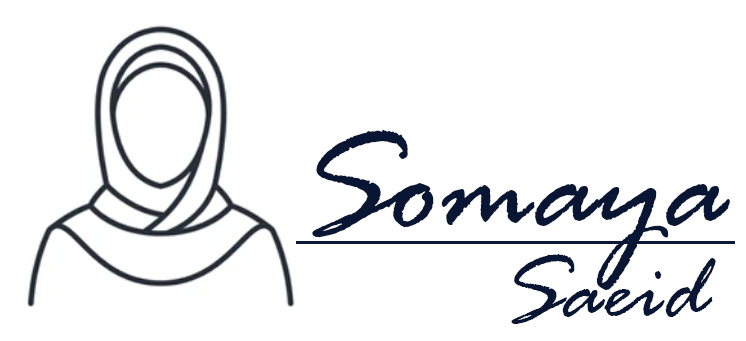
<style>
.page{position:relative;width:746px;height:341px;background:#ffffff}
.page>*{position:absolute;margin:0}
.t1{font:147.9px "RageItalic";color:#081634}
.t2{font:97.3px "RageItalic";color:#081634}
</style>
<div class="page">
<p class="t1" style="left:312px;top:130px;width:418px;height:160px">Somaya</p>
<p class="t2" style="left:511px;top:254px;width:205px;height:70px">Saeid</p>
</div>
